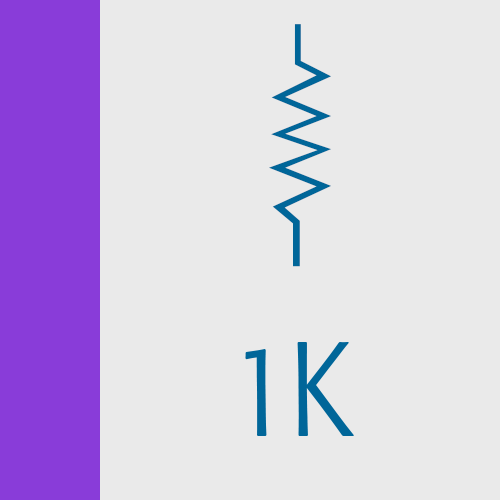
<style>
.page{position:relative;width:500px;height:500px;background:#eaeaea}
.page>*{position:absolute;margin:0}
.t1{font:251.9px "CircuitBoard";color:#006699}
.t2{font:133.2px "Formata-LightCondensed";color:#006699}
</style>
<div class="page">
<p class="t1" style="left:269px;top:24px;width:63px;height:243px">Y</p>
<p class="t2" style="left:245px;top:342px;width:109px;height:94px">1K</p>
</div>
